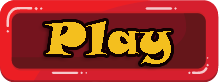
<style>
.page{position:relative;width:219px;height:82px}
.page>*{position:absolute;margin:0}
.t1{font:44.4px "SnapITC-Regular";color:#f4bf1e;scale:1.14 1}
</style>
<div class="page">
<p class="t1" style="left:45px;top:21px;width:126px;height:43px">Play</p>
</div>
